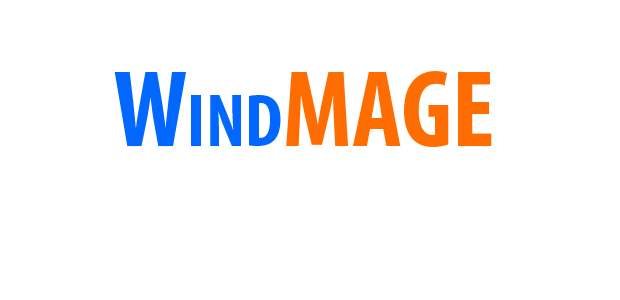
<style>
.page{position:relative;width:620px;height:300px;background:#ffffff}
.page>*{position:absolute;margin:0}
.t1{font:109.1px "MyriadPro-BoldCond";color:#ff6d01;text-transform:uppercase}
.t2{font:109.1px "MyriadPro-BoldCond";color:#0167ff;text-transform:uppercase}
.t3{font:109.1px "MyriadPro-BoldCond";color:#0167ff;font-variant:small-caps}
</style>
<div class="page">
<p class="t1" style="left:114px;top:71px;width:378px;height:76px"><span class="t2">W</span><span class="t3">ind</span>Mage</p>
</div>
